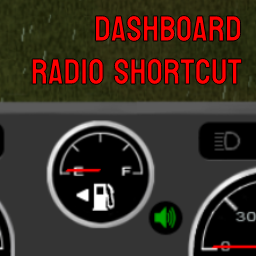
<style>
.page{position:relative;width:256px;height:256px;background:#343434}
.page>*{position:absolute;margin:0}
.t1{font:36px "Koulen-Regular"}
</style>
<div class="page">
<p class="t1" style="left:31px;top:14px;width:212px;height:72px;text-align:right">Dashboard<br>Radio Shortcut</p>
</div>
